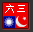
<style>
.page{position:relative;width:33px;height:32px;background:#f20000}
.page>*{position:absolute;margin:0}
.t1{font:10.4px "SimSun";color:#ffffff}
</style>
<div class="page">
<p class="t1" style="left:5px;top:4px;width:20px;height:9px">六三</p>
</div>
